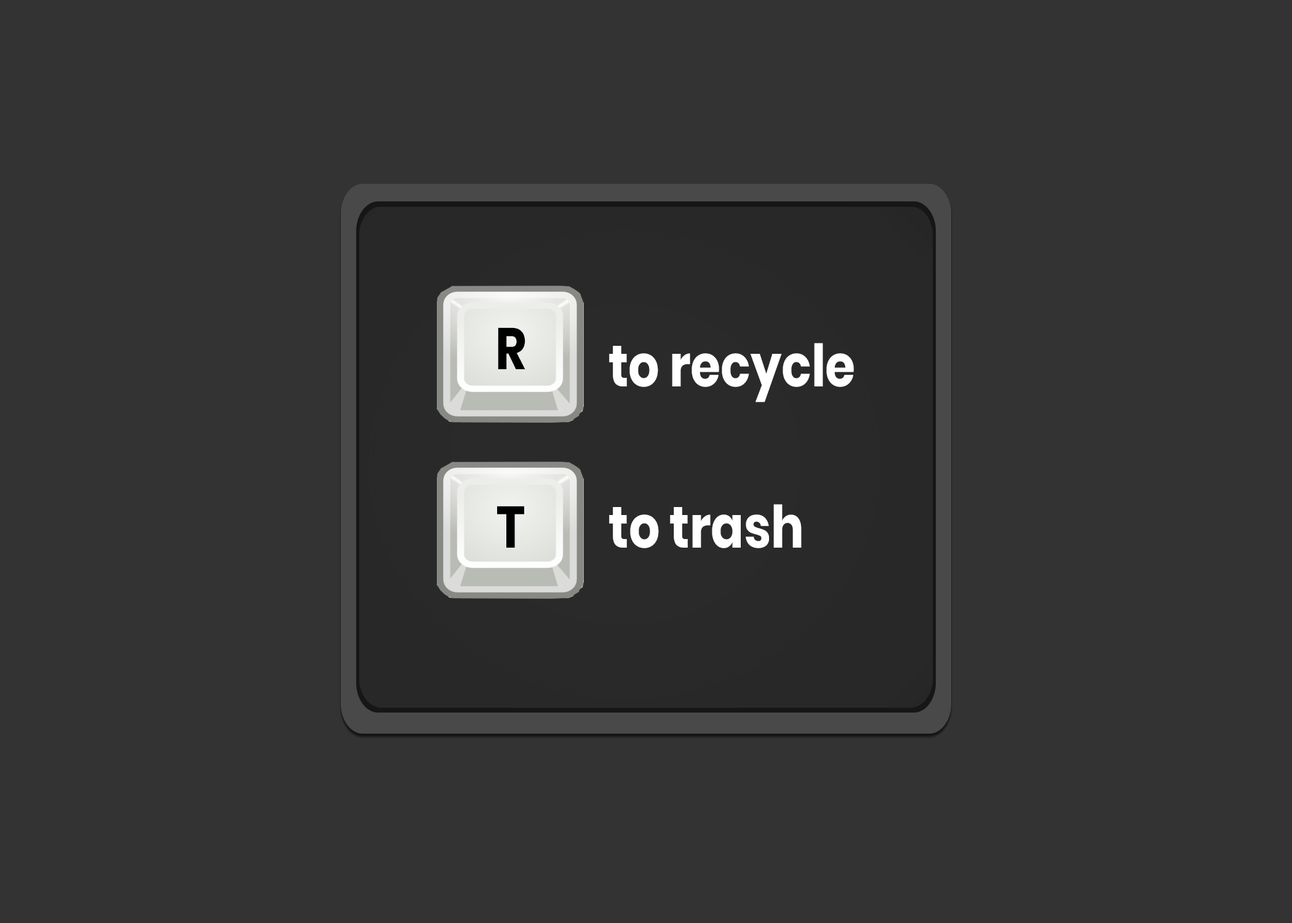
<style>
.page{position:relative;width:1292px;height:923px;background:#333333}
.page>*{position:absolute;margin:0}
.t1{font:58.5px "Poppins-Bold";color:#000000;scale:0.83 1}
.t2{font:58.5px "Poppins-Bold";color:#ffffff;scale:0.83 1}
</style>
<div class="page">
<p class="t1" style="left:498px;top:327px;width:27px;height:42px">R</p>
<p class="t2" style="left:609px;top:343px;width:245px;height:59px">to recycle</p>
<p class="t1" style="left:497px;top:506px;width:27px;height:42px">T</p>
<p class="t2" style="left:609px;top:504px;width:193px;height:44px">to trash</p>
</div>
